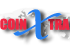
<style>
.page{position:relative;width:70px;height:50px;background:#ffffff}
.page>*{position:absolute;margin:0}
.t1{font:38px "LucidaCalligraphy-Italic";color:#2780ee;font-style:italic;scale:1.16 1}
.t2{font:13.4px "Impact";color:#ee2743;scale:1.04 1}
</style>
<div class="page">
<p class="t1" style="left:13px;top:9px;width:49px;height:31px;rotate:9deg">X</p>
<p class="t2" style="left:0px;top:18px;width:27px;height:12px">COIN</p>
<p class="t2" style="left:48px;top:19px;width:22px;height:11px">TRA</p>
</div>
